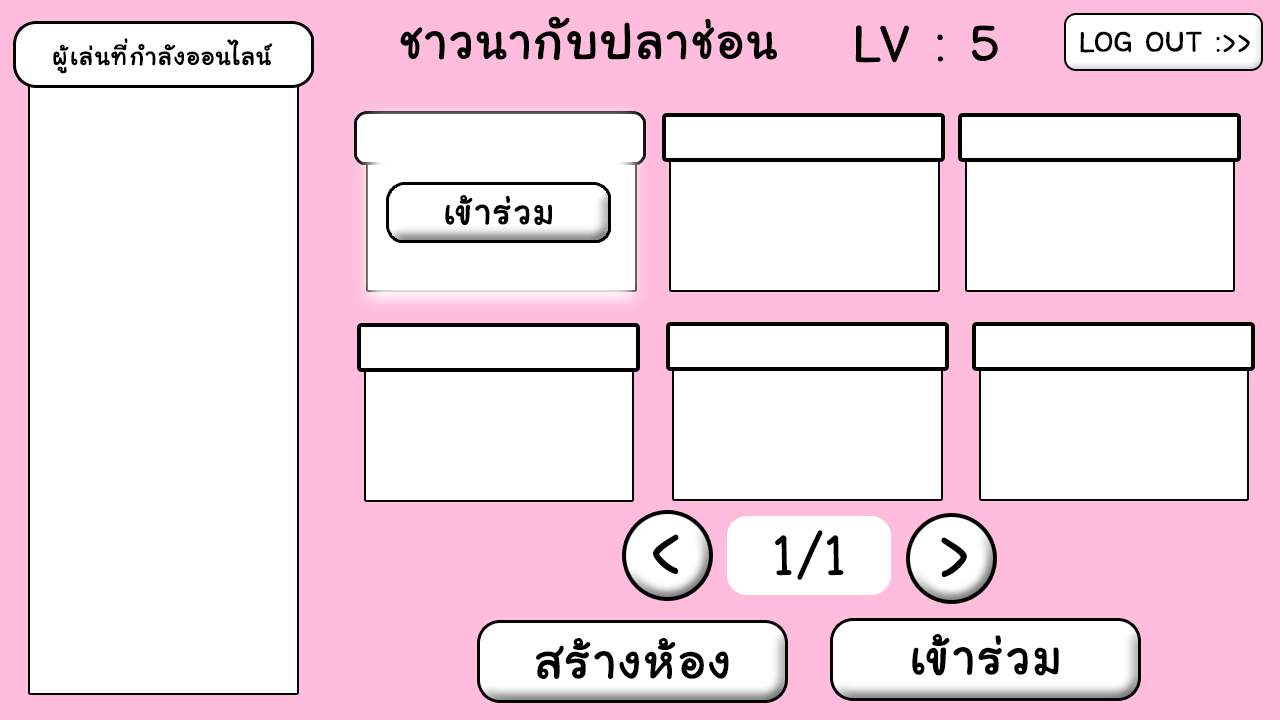
<style>
.page{position:relative;width:1280px;height:720px;background:#ffffff}
.page>*{position:absolute;margin:0}
.t1{font:72.1px "LayijiMaHaNiYomV1.5";color:#000000;font-weight:bold}
.t2{font:34.9px "LayijiMaHaNiYomV1.5";color:#000000;font-weight:bold}
.t3{font:39.5px "LayijiMaHaNiYomV1.5";color:#000000;font-weight:bold}
.t4{font:51px "LayijiMaHaNiYomV1.5";color:#000000;font-weight:bold}
.t5{font:91px "LayijiMaHaNiYomV1.5";color:#000000;font-weight:bold}
.t6{font:79px "LayijiMaHaNiYomV1.5";color:#000000;font-weight:bold}
.t7{font:70.4px "LayijiMaHaNiYomV1.5";color:#000000;font-weight:bold}
</style>
<div class="page">
<p class="t1" style="left:400px;top:16px;width:377px;height:45px">ชาวนากับปลาช่อน</p>
<p class="t1" style="left:855px;top:25px;width:143px;height:38px">LV : 5</p>
<p class="t2" style="left:53px;top:38px;width:220px;height:36px">ผู้เล่นที่กำลังออนไลน์</p>
<p class="t3" style="left:1080px;top:31px;width:170px;height:22px">LOG OUT :&gt;&gt;</p>
<p class="t4" style="left:445px;top:195px;width:107px;height:31px">เข้าร่วม</p>
<p class="t5" style="left:653px;top:534px;width:26px;height:40px">&lt;</p>
<p class="t6" style="left:775px;top:530px;width:69px;height:50px">1/1</p>
<p class="t5" style="left:941px;top:537px;width:26px;height:40px">&gt;</p>
<p class="t7" style="left:536px;top:638px;width:193px;height:42px">สร้างห้อง</p>
<p class="t7" style="left:912px;top:634px;width:147px;height:42px">เข้าร่วม</p>
</div>
